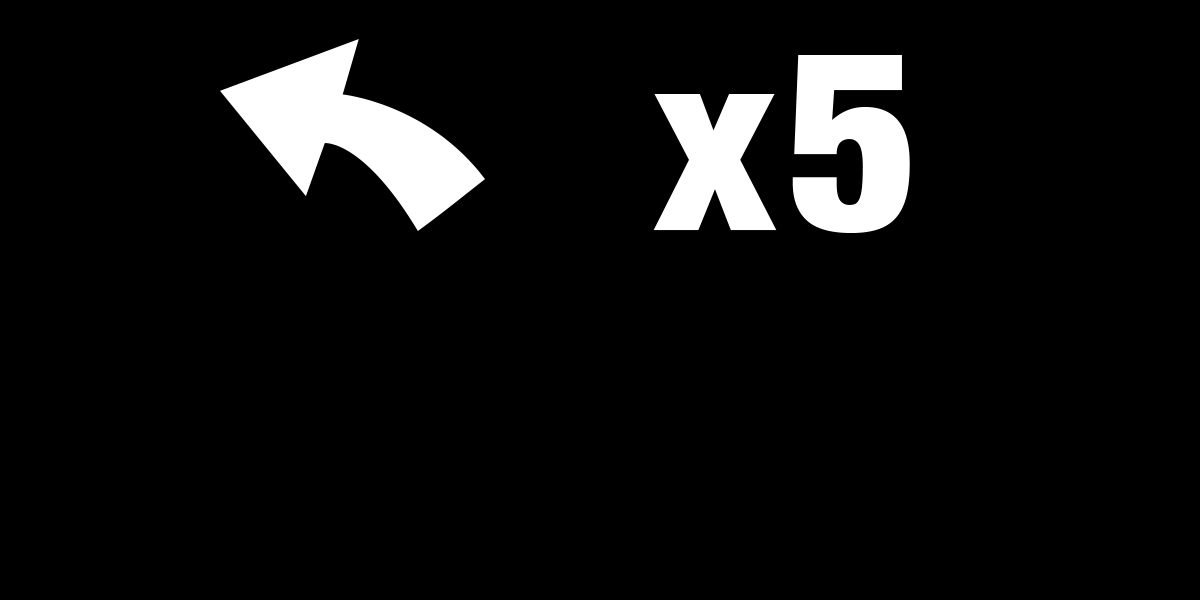
<style>
.page{position:relative;width:1200px;height:600px;background:#000000}
.page>*{position:absolute;margin:0}
.t1{font:252.3px "HelveticaNeue-CondensedBlack";letter-spacing:0.05em;color:#ffffff}
</style>
<div class="page">
<p class="t1" style="left:653px;top:55px;width:257px;height:178px">x5</p>
</div>
